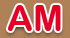
<style>
.page{position:relative;width:70px;height:38px;background:#ae8157}
.page>*{position:absolute;margin:0}
.t1{font:36px "ArialRoundedMTBold";color:#e60023}
</style>
<div class="page">
<p class="t1" style="left:8px;top:5px;width:53px;height:26px">AM</p>
</div>
